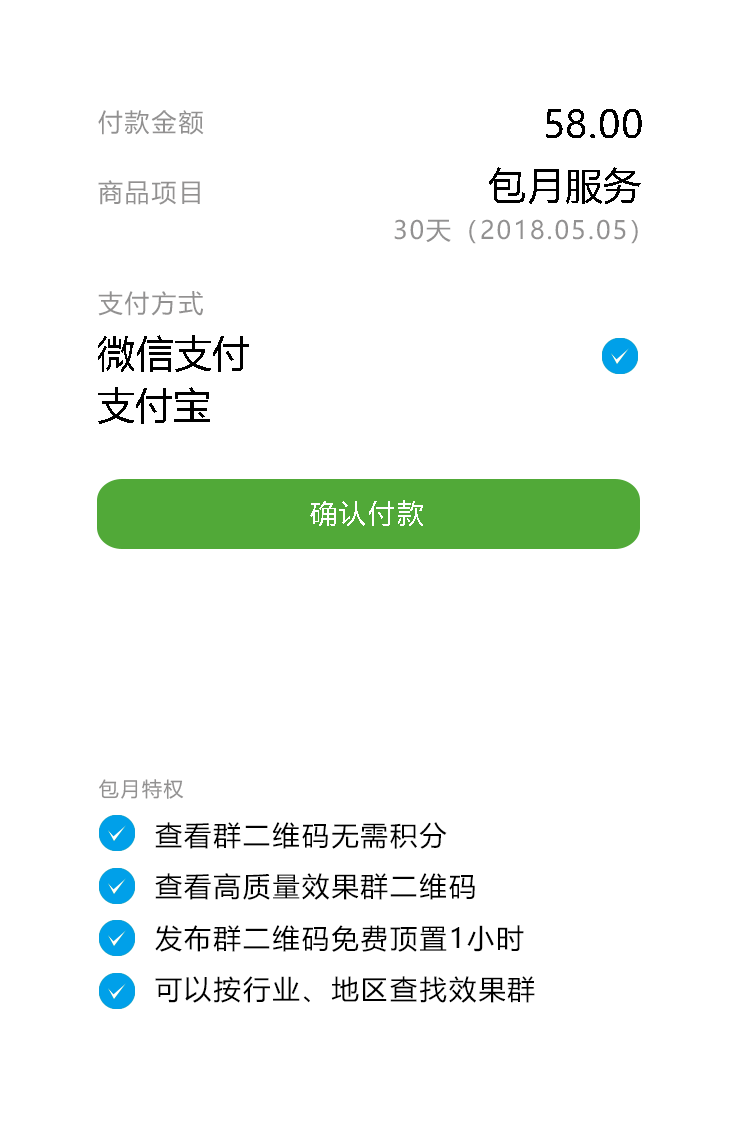
<style>
.page{position:relative;width:740px;height:1136px;background:#ffffff}
.page>*{position:absolute;margin:0}
.t1{font:25px "MicrosoftYaHei";letter-spacing:0.08em;color:#929191}
.t2{font:38px "MicrosoftYaHei";color:#000000}
.t3{font:27.3px "MicrosoftYaHei";letter-spacing:0.08em;color:#ffffff}
.t4{font:20px "MicrosoftYaHei";letter-spacing:0.08em;color:#929191}
.t5{font:27.3px "MicrosoftYaHei";letter-spacing:0.08em;color:#000000}
</style>
<div class="page">
<p class="t1" style="left:98px;top:110px;width:106px;height:25px">付款金额</p>
<p class="t2" style="left:546px;top:109px;width:96px;height:29px">58.00</p>
<p class="t2" style="left:489px;top:167px;width:152px;height:37px">包月服务</p>
<p class="t1" style="left:98px;top:180px;width:102px;height:25px">商品项目</p>
<p class="t1" style="left:394px;top:219px;width:244px;height:25px">30天（2018.05.05）</p>
<p class="t1" style="left:98px;top:291px;width:105px;height:25px">支付方式</p>
<p class="t2" style="left:98px;top:335px;width:151px;height:37px">微信支付</p>
<p class="t2" style="left:98px;top:387px;width:112px;height:37px">支付宝</p>
<p class="t3" style="left:310px;top:500px;width:113px;height:26px">确认付款</p>
<p class="t4" style="left:99px;top:779px;width:85px;height:20px">包月特权</p>
<p class="t5" style="left:155px;top:822px;width:292px;height:27px">查看群二维码无需积分</p>
<p class="t5" style="left:155px;top:873px;width:320px;height:27px">查看高质量效果群二维码</p>
<p class="t5" style="left:155px;top:925px;width:369px;height:27px">发布群二维码免费顶置1小时</p>
<p class="t5" style="left:155px;top:976px;width:380px;height:27px">可以按行业、地区查找效果群</p>
</div>
